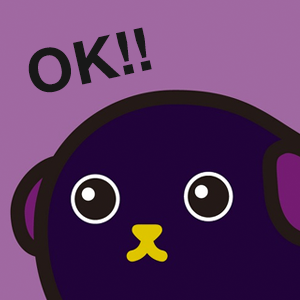
<style>
.page{position:relative;width:300px;height:300px;background:#a068a1}
.page>*{position:absolute;margin:0}
.t1{font:60px "HelveticaNeue-Bold";letter-spacing:0.016em;color:#181818}
</style>
<div class="page">
<p class="t1" style="left:28px;top:27px;width:124px;height:66px;rotate:-13deg">OK!!</p>
</div>
